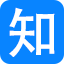
<style>
.page{position:relative;width:64px;height:64px;background:#0884ff}
.page>*{position:absolute;margin:0}
.t1{font:53px "AdobeHeitiStd-Regular";letter-spacing:0.3em;color:#ffffff}
</style>
<div class="page">
<p class="t1" style="left:9px;top:7px;width:46px;height:50px">知</p>
</div>
